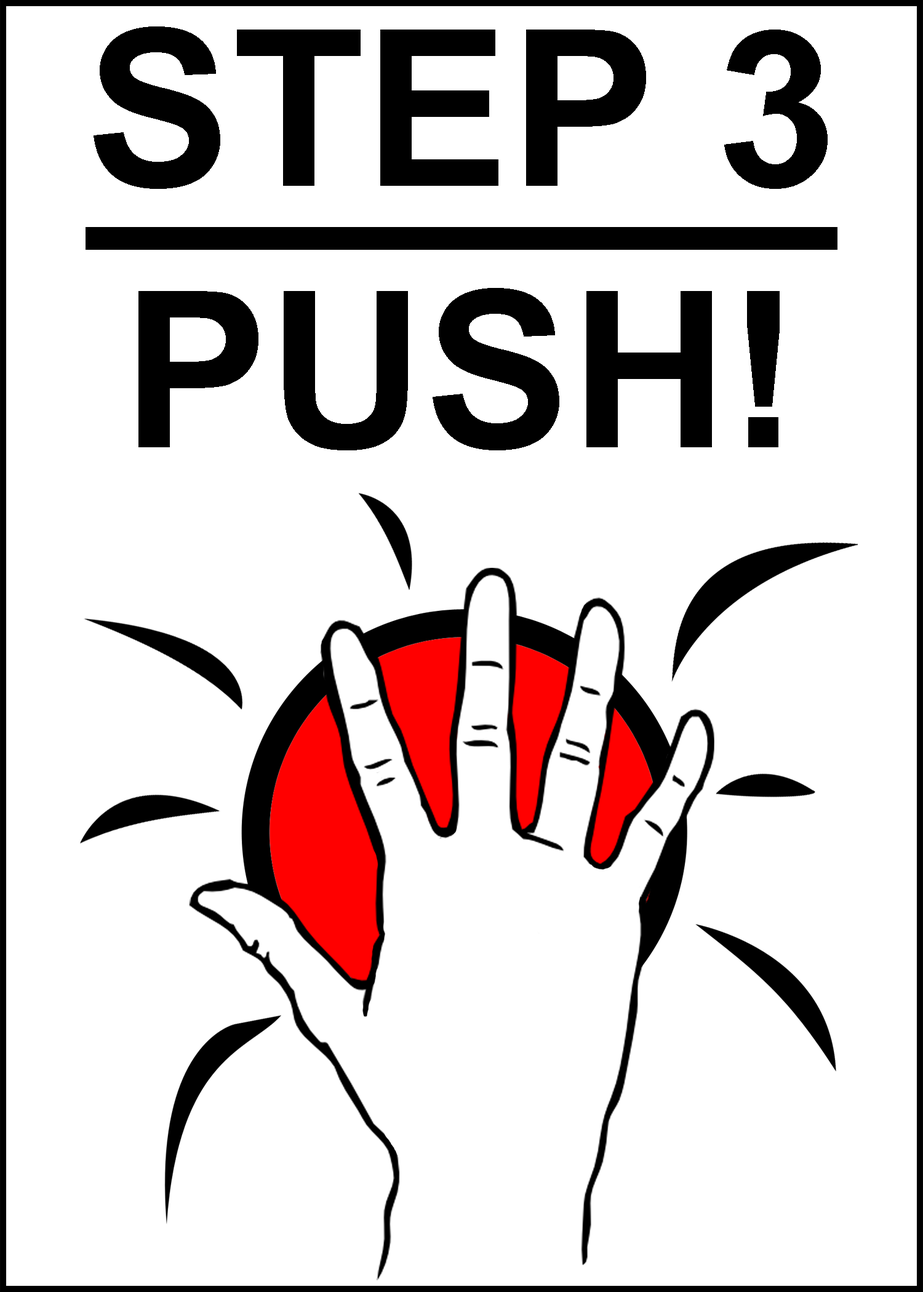
<style>
.page{position:relative;width:923px;height:1292px;background:#ffffff}
.page>*{position:absolute;margin:0}
.t1{font:217.9px "Arial-BoldMT";color:#000000;text-decoration:underline}
.t2{font:217.9px "Arial-BoldMT";color:#000000}
</style>
<div class="page">
<p class="t1" style="left:86px;top:26px;width:751px;height:424px;text-align:center">STEP 3<br><span class="t2">PUSH!</span></p>
</div>
